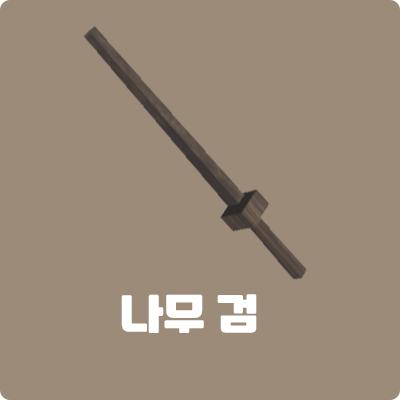
<style>
.page{position:relative;width:400px;height:400px;background:#9c8b79}
.page>*{position:absolute;margin:0}
.t1{font:45px "TTTogether";color:#ffffff}
</style>
<div class="page">
<p class="t1" style="left:121px;top:294px;width:136px;height:39px">나무 검</p>
</div>
